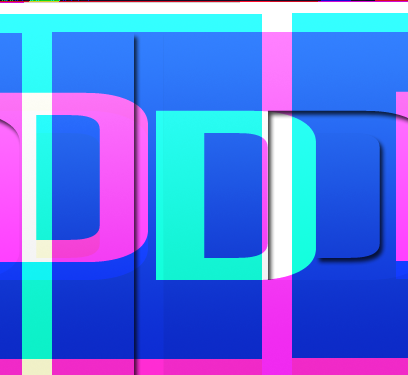
<style>
.page{position:relative;width:408px;height:375px}
.page>*{position:absolute;margin:0}
.t1{font:221.4px "AgencyFB-Bold";scale:1.89 1}
</style>
<div class="page">
<p class="t1" style="left:116px;top:91px;width:160px;height:170px">D</p>
</div>
